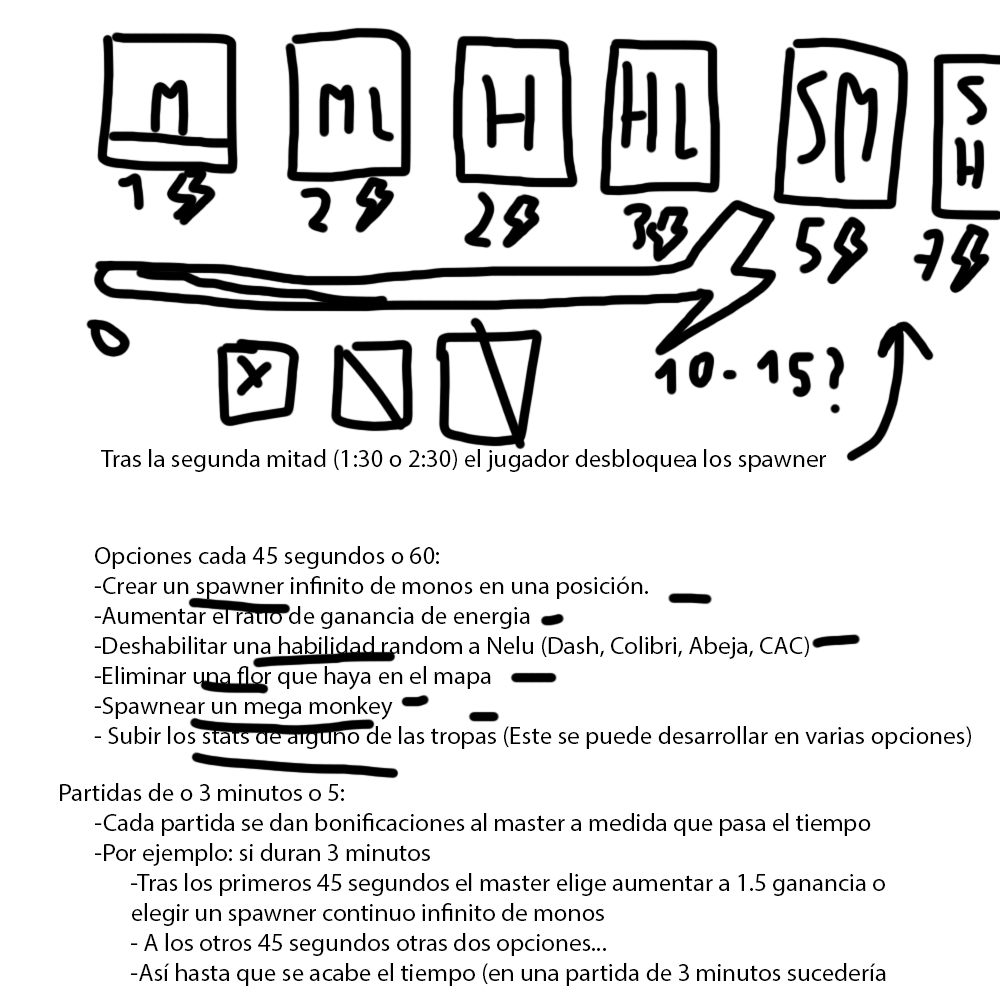
<style>
.page{position:relative;width:1000px;height:1000px;background:#ffffff}
.page>*{position:absolute;margin:0}
.t1{font:25px "MyriadPro-Regular";color:#000000}
</style>
<div class="page">
<p class="t1" style="left:101px;top:449px;width:725px;height:23px">Tras la segunda mitad (1:30 o 2:30) el jugador desbloquea los spawner</p>
<p class="t1" style="left:94px;top:546px;width:877px;height:203px">Opciones cada 45 segundos o 60:<br>-Crear un spawner infinito de monos en una posición. <br>-Aumentar el ratio de ganancia de energia<br>-Deshabilitar una habilidad random a Nelu (Dash, Colibri, Abeja, CAC)<br>-Eliminar una flor que haya en el mapa<br>-Spawnear un mega monkey<br>- Subir los stats de alguno de las tropas (Este se puede desarrollar en varias opciones)</p>
<p class="t1" style="left:60px;top:783px;width:826px;height:203px">Partidas de o 3 minutos o 5:<br> -Cada partida se dan bonificaciones al master a medida que pasa el tiempo<br> -Por ejemplo: si duran 3 minutos<br>  -Tras los primeros 45 segundos el master elige aumentar a 1.5 ganancia o <br>  elegir un spawner continuo infinito de monos<br>  - A los otros 45 segundos otras dos opciones...<br>  -Así hasta que se acabe el tiempo (en una partida de 3 minutos sucedería</p>
</div>
